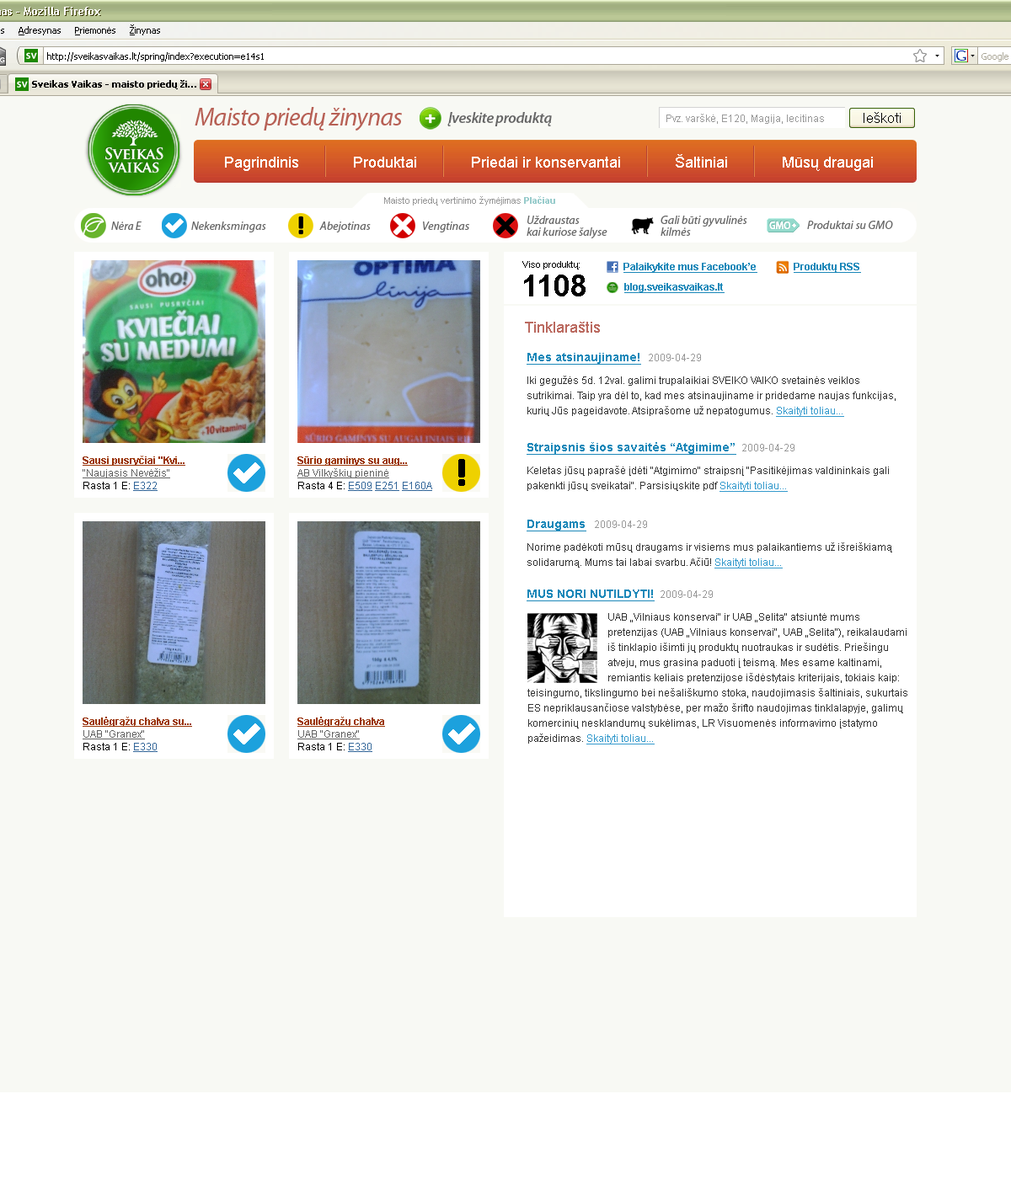
<style>
.page{position:relative;width:1011px;height:1179px;background:#f8f9f4}
.page>*{position:absolute;margin:0}
.t1{font:25.3px "MyriadPro-It";letter-spacing:-0.025em;color:#b76055}
.t2{font:15.2px "MyriadPro-SemiboldIt";letter-spacing:-0.025em;color:#666666}
.t3{font:10.1px "ArialMT";color:#999999}
.t4{font:9.3px "ArialMT";color:#999999}
.t5{font:9.3px "Arial-BoldMT";color:#99cccc}
.t6{font:9.3px "ArialMT";color:#000000}
.t7{font:10.1px "Arial-BoldMT";color:#1c88b9;text-decoration:underline}
.t8{font:30.3px "Arial-BoldMT";color:#000000}
.t9{font:15.2px "ArialMT";color:#bb6a60}
.t10{font:11.8px "Arial-BoldMT";color:#1c88b9;text-decoration:underline}
.t11{font:10.1px/15.2px "ArialMT";color:#333333}
.t12{font:10.1px/15.2px "ArialMT";color:#3399cc;text-decoration:underline}
</style>
<div class="page">
<p class="t1" style="left:195px;top:107px;width:207px;height:24px">Maisto priedų žinynas</p>
<p class="t2" style="left:447px;top:112px;width:105px;height:14px">Įveskite produktą</p>
<p class="t3" style="left:666px;top:114px;width:158px;height:10px">Pvz. varškė, E120, Magija, lecitinas</p>
<p class="t4" style="left:384px;top:196px;width:171px;height:10px">Maisto priedų vertinimo žymėjimas <span class="t5">Plačiau</span></p>
<p class="t6" style="left:522px;top:261px;width:58px;height:9px">Viso produktų:</p>
<p class="t7" style="left:623px;top:263px;width:134px;height:10px">Palaikykite mus Facebook’e</p>
<p class="t7" style="left:794px;top:263px;width:67px;height:10px">Produktų RSS</p>
<p class="t8" style="left:524px;top:275px;width:62px;height:22px">1108</p>
<p class="t7" style="left:624px;top:283px;width:101px;height:10px">blog.sveikasvaikas.lt</p>
<p class="t9" style="left:525px;top:322px;width:75px;height:11px">Tinklaraštis</p>
<p class="t10" style="left:527px;top:353px;width:114px;height:12px">Mes atsinaujiname!</p>
<p class="t3" style="left:649px;top:354px;width:52px;height:7px">2009-04-29</p>
<p class="t11" style="left:527px;top:376px;width:369px;height:41px">Iki gegužės 5d. 12val. galimi trupalaikiai SVEIKO VAIKO svetainės veiklos <br>sutrikimai. Taip yra dėl to, kad mes atsinaujiname ir pridedame naujas funkcijas, <br>kurių Jūs pageidavote. Atsiprašome už nepatogumus. <span class="t12">Skaityti toliau...</span></p>
<p class="t10" style="left:527px;top:442px;width:209px;height:13px">Straipsnis šios savaitės “Atgimime”</p>
<p class="t3" style="left:742px;top:444px;width:52px;height:8px">2009-04-29</p>
<p class="t11" style="left:527px;top:466px;width:362px;height:26px">Keletas jūsų paprašė įdėti "Atgimimo" straipsnį "Pasitikėjimas valdininkais gali <br>pakenkti jūsų sveikatai". Parsisiųskite pdf <span class="t12">Skaityti toliau...</span></p>
<p class="t10" style="left:527px;top:520px;width:59px;height:12px">Draugams</p>
<p class="t3" style="left:595px;top:521px;width:52px;height:7px">2009-04-29</p>
<p class="t11" style="left:527px;top:543px;width:365px;height:26px">Norime padėkoti mūsų draugams ir visiems mus palaikantiems už išreiškiamą <br>solidarumą. Mums tai labai svarbu. Ačiū! <span class="t12">Skaityti toliau...</span></p>
<p class="t10" style="left:527px;top:590px;width:128px;height:12px">MUS NORI NUTILDYTI!</p>
<p class="t3" style="left:661px;top:591px;width:52px;height:7px">2009-04-29</p>
<p class="t11" style="left:608px;top:613px;width:299px;height:70px">UAB „Vilniaus konservai“ ir UAB „Selita“ atsiuntė mums <br>pretenzijas (UAB „Vilniaus konservai“, UAB „Selita“), reikalaudami <br>iš tinklapio išimti jų produktų nuotraukas ir sudėtis. Priešingu <br>atveju, mus grasina paduoti į teismą. Mes esame kaltinami, <br>remiantis keliais pretenzijose išdėstytais kriterijais, tokiais kaip:</p>
<p class="t11" style="left:527px;top:688px;width:380px;height:57px">teisingumo, tikslingumo bei nešališkumo stoka, naudojimasis šaltiniais, sukurtais <br>ES nepriklausančiose valstybėse, per mažo šrifto naudojimas tinklalapyje, galimų <br>komercinių nesklandumų sukėlimas, LR Visuomenės informavimo įstatymo <br>pažeidimas. <span class="t12">Skaityti toliau...</span></p>
</div>
